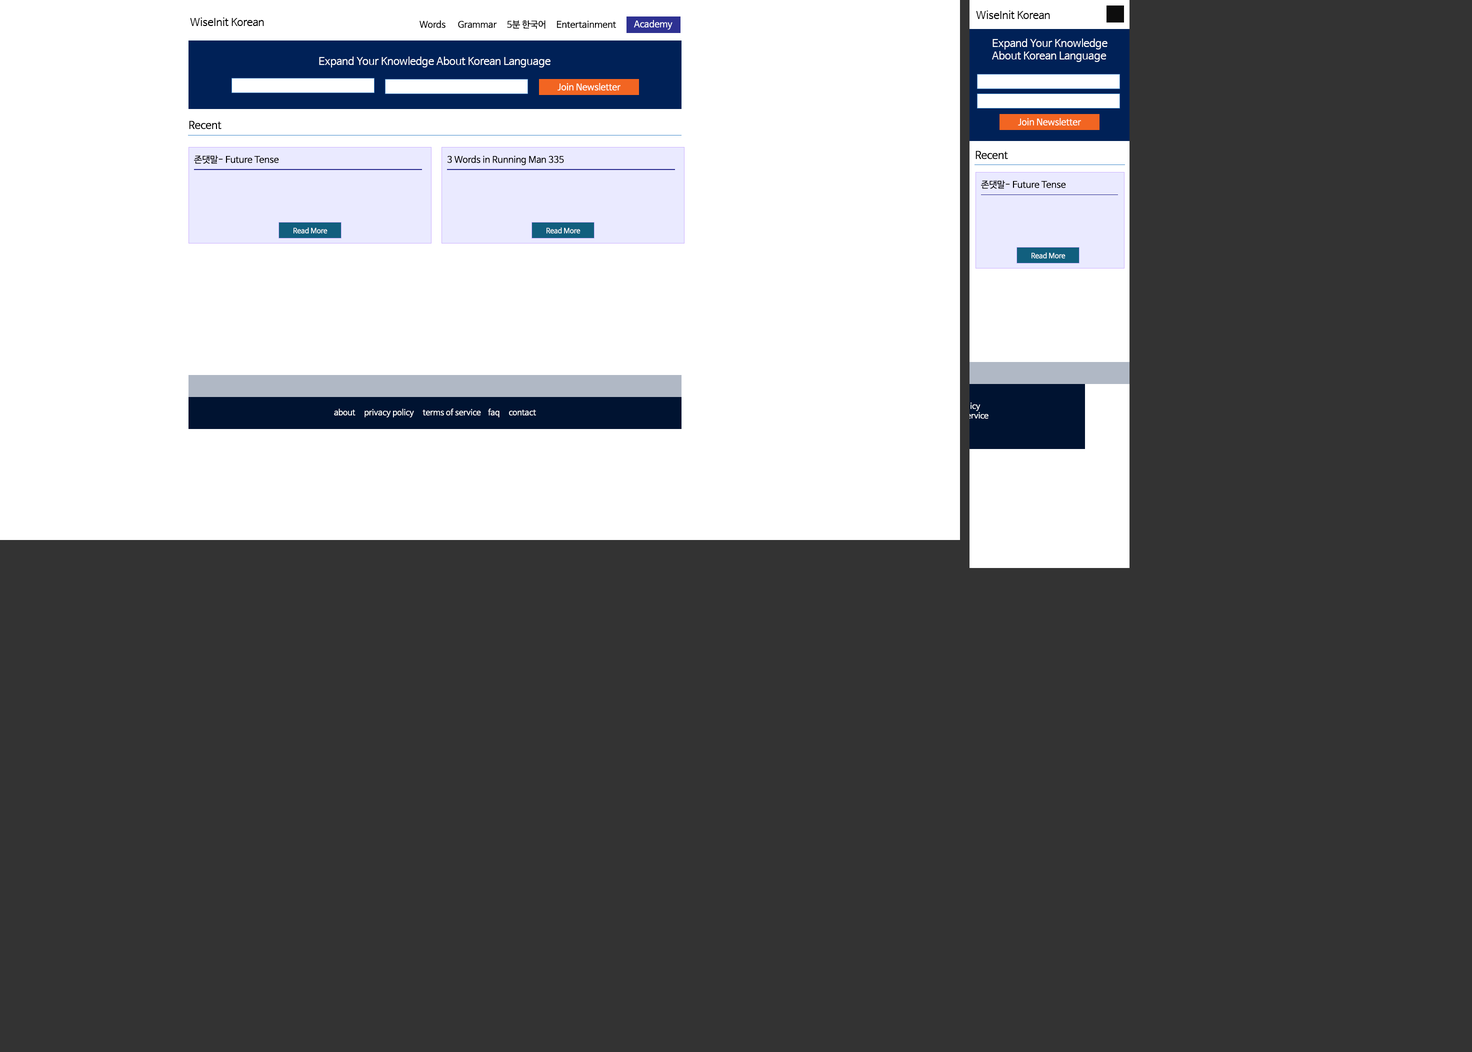
<style>
.page{position:relative;width:1472px;height:1052px;background:#333333}
.page>*{position:absolute;margin:0}
.t1{font:10.5px "NanumBarunGothic";color:#000000}
.t2{font:9px "NanumBarunGothic";color:#000000}
.t3{font:9px "NanumBarunGothic";color:#ffffff}
.t4{font:10.5px "NanumBarunGothic";color:#fefefe}
.t5{font:9px "NanumBarunGothic";color:#fefefe}
.t6{font:7px "NanumBarunGothic";color:#ffffff}
.t7{font:8px "NanumBarunGothic";color:#ffffff}
</style>
<div class="page">
<p class="t1" style="left:190px;top:18px;width:74px;height:8px">WiseInit Korean</p>
<p class="t1" style="left:976px;top:10px;width:74px;height:9px">WiseInit Korean</p>
<p class="t2" style="left:420px;top:20px;width:196px;height:9px">Words      Grammar     5분 한국어     Entertainment</p>
<p class="t3" style="left:634px;top:20px;width:38px;height:10px">Academy</p>
<p class="t4" style="left:992px;top:38px;width:116px;height:24px">Expand Your Knowledge <br>About Korean Language</p>
<p class="t4" style="left:319px;top:56px;width:231px;height:12px">Expand Your Knowledge About Korean Language</p>
<p class="t5" style="left:558px;top:83px;width:62px;height:7px">Join Newsletter</p>
<p class="t1" style="left:189px;top:120px;width:33px;height:10px">Recent</p>
<p class="t5" style="left:1018px;top:118px;width:63px;height:8px">Join Newsletter</p>
<p class="t2" style="left:194px;top:155px;width:85px;height:9px">존댓말- Future Tense</p>
<p class="t2" style="left:448px;top:156px;width:116px;height:10px">3 Words in Running Man 335</p>
<p class="t1" style="left:976px;top:150px;width:32px;height:10px">Recent</p>
<p class="t2" style="left:981px;top:180px;width:85px;height:9px">존댓말- Future Tense</p>
<p class="t6" style="left:294px;top:228px;width:34px;height:6px">Read More</p>
<p class="t6" style="left:546px;top:228px;width:34px;height:6px">Read More</p>
<p class="t6" style="left:1032px;top:252px;width:34px;height:6px">Read More</p>
<p class="t7" style="left:334px;top:408px;width:202px;height:10px">about     privacy policy     terms of service    faq     contact</p>
</div>
